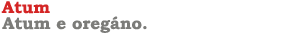
<style>
.page{position:relative;width:300px;height:50px;background:#ffffff}
.page>*{position:absolute;margin:0}
.t1{font:17px "BookmanOldStyle-Bold";color:#d42525}
.t2{font:17px "BookmanOldStyle-Bold";color:#7c7c79}
</style>
<div class="page">
<p class="t1" style="left:1px;top:1px;width:49px;height:13px">Atum</p>
<p class="t2" style="left:2px;top:16px;width:145px;height:17px">Atum e oregáno.</p>
</div>
